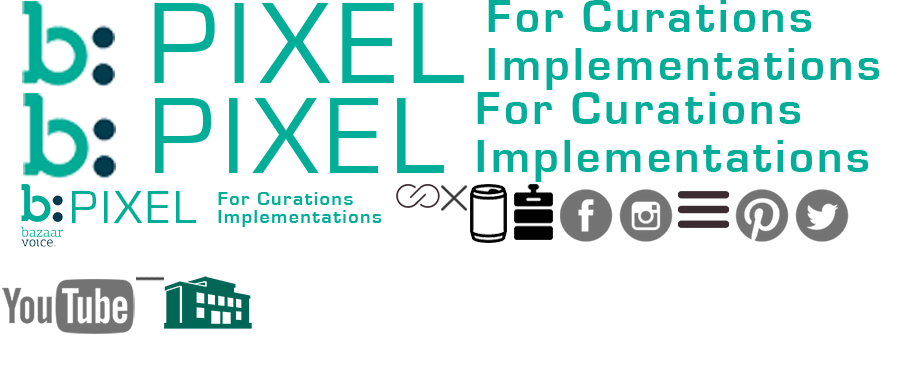
<style>
.page{position:relative;width:920px;height:368px;background:#ffffff}
.page>*{position:absolute;margin:0}
.t1{font:120px "EurostileRegular";letter-spacing:0.071em;color:#03ad97}
.t2{font:48px/48px "EurostileBold";letter-spacing:0.071em;color:#03ad97}
.t3{font:112px "EurostileRegular";letter-spacing:0.071em;color:#03ad97}
.t4{font:48px "EurostileRegular";letter-spacing:0.071em;color:#03ad97}
.t5{font:20px/18px "EurostileBold";letter-spacing:0.071em;color:#03ad97}
</style>
<div class="page">
<p class="t1" style="left:154px;top:3px;width:310px;height:80px">PIXEL</p>
<p class="t2" style="left:488px;top:0px;width:392px;height:90px">For Curations<br>Implementations</p>
<p class="t3" style="left:155px;top:98px;width:289px;height:75px">PIXEL</p>
<p class="t2" style="left:477px;top:92px;width:392px;height:90px">For Curations<br>Implementations</p>
<p class="t4" style="left:72px;top:191px;width:125px;height:32px">PIXEL</p>
<p class="t5" style="left:218px;top:192px;width:164px;height:35px">For Curations<br>Implementations</p>
</div>
